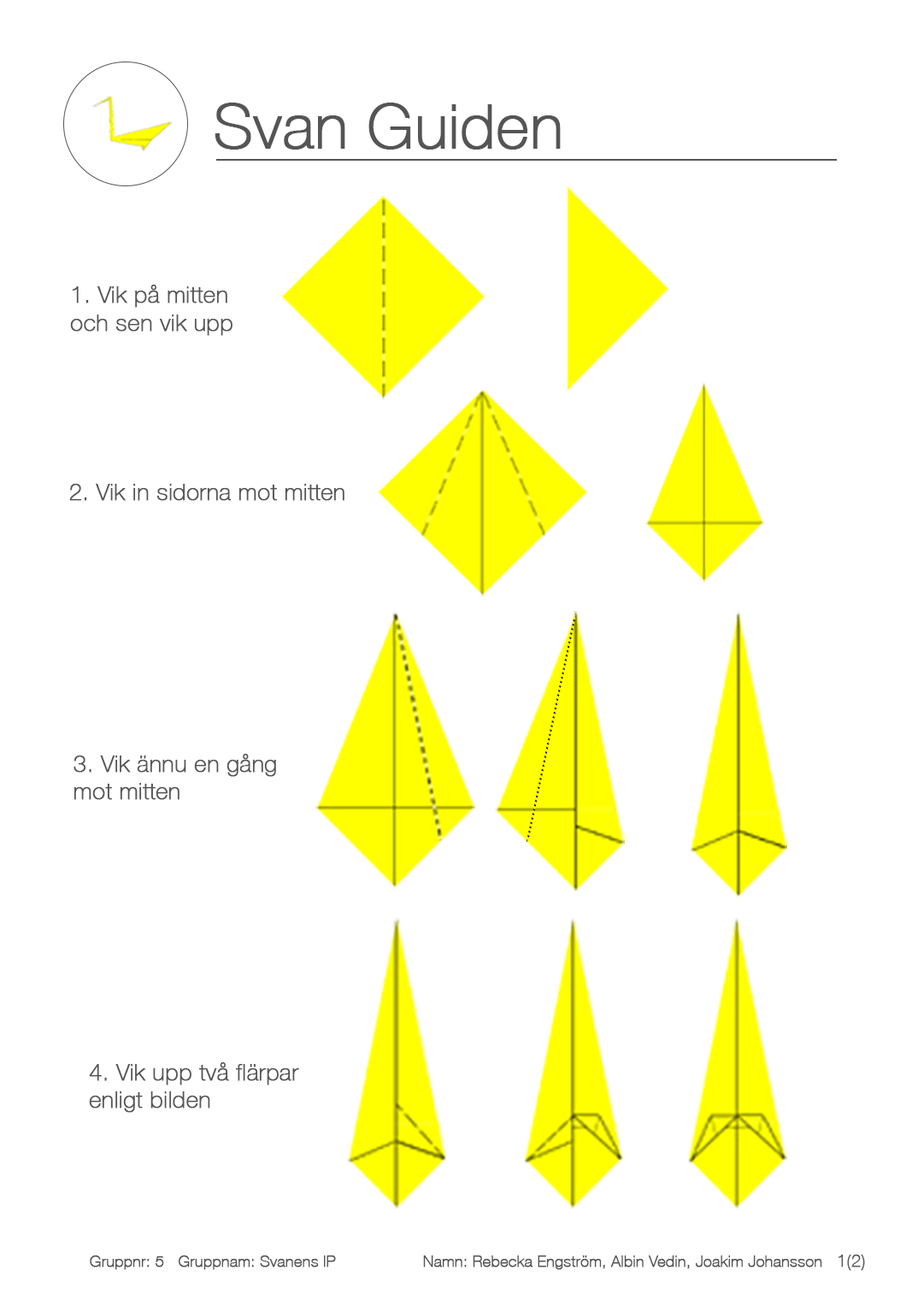
<style>
.page{position:relative;width:918px;height:1299px;background:#ffffff}
.page>*{position:absolute;margin:0}
.t1{font:61.7px "HelveticaNeue-Thin";color:#555555;font-weight:bold}
.t2{font:23.1px "HelveticaNeue-Thin";color:#555555;font-weight:bold}
.t3{font:15.4px "HelveticaNeue-Thin";color:#555555;font-weight:bold}
.t4{font:17px "HelveticaNeue-Thin";color:#555555;font-weight:bold}
</style>
<div class="page">
<p class="t1" style="left:215px;top:103px;width:346px;height:47px">Svan Guiden</p>
<p class="t2" style="left:70px;top:285px;width:162px;height:51px">1. Vik på mitten<br>och sen vik upp</p>
<p class="t2" style="left:69px;top:484px;width:275px;height:17px">2. Vik in sidorna mot mitten</p>
<p class="t2" style="left:74px;top:754px;width:202px;height:46px">3. Vik ännu en gång<br>mot mitten</p>
<p class="t2" style="left:89px;top:1062px;width:210px;height:51px">4. Vik upp två flärpar<br>enligt bilden</p>
<p class="t3" style="left:90px;top:1255px;width:732px;height:15px">Gruppnr: 5   Gruppnam: Svanens IP  Namn: Rebecka Engström, Albin Vedin, Joakim Johansson</p>
<p class="t4" style="left:838px;top:1255px;width:27px;height:16px">1(2)</p>
</div>
